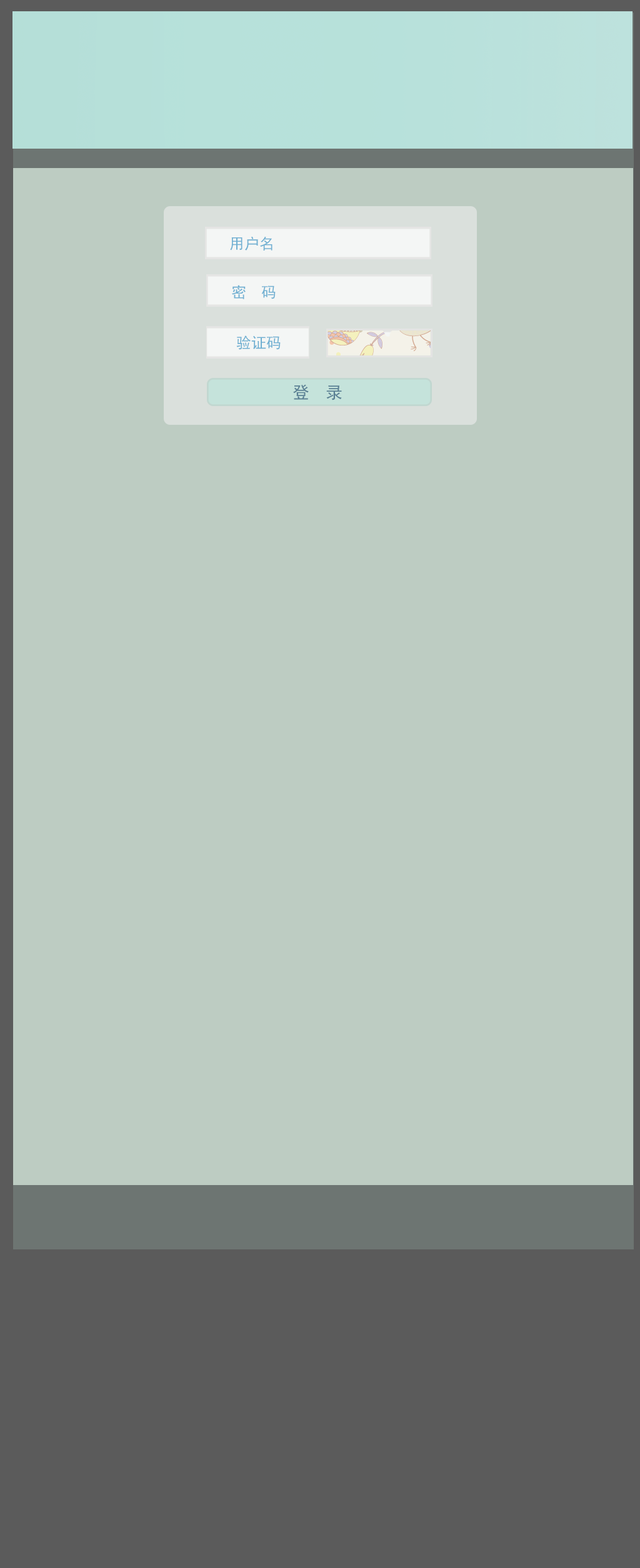
<style>
.page{position:relative;width:640px;height:1568px;background:#bdccc2}
.page>*{position:absolute;margin:0}
.t1{font:15px "SimHei";color:#70b0d2}
.t2{font:16.7px "SimHei";color:#597f93}
</style>
<div class="page">
<p class="t1" style="left:230px;top:236px;width:42px;height:15px">用户名</p>
<p class="t1" style="left:232px;top:285px;width:43px;height:14px">密  码</p>
<p class="t1" style="left:236px;top:335px;width:44px;height:15px">验证码</p>
<p class="t2" style="left:293px;top:384px;width:49px;height:16px">登  录</p>
</div>
